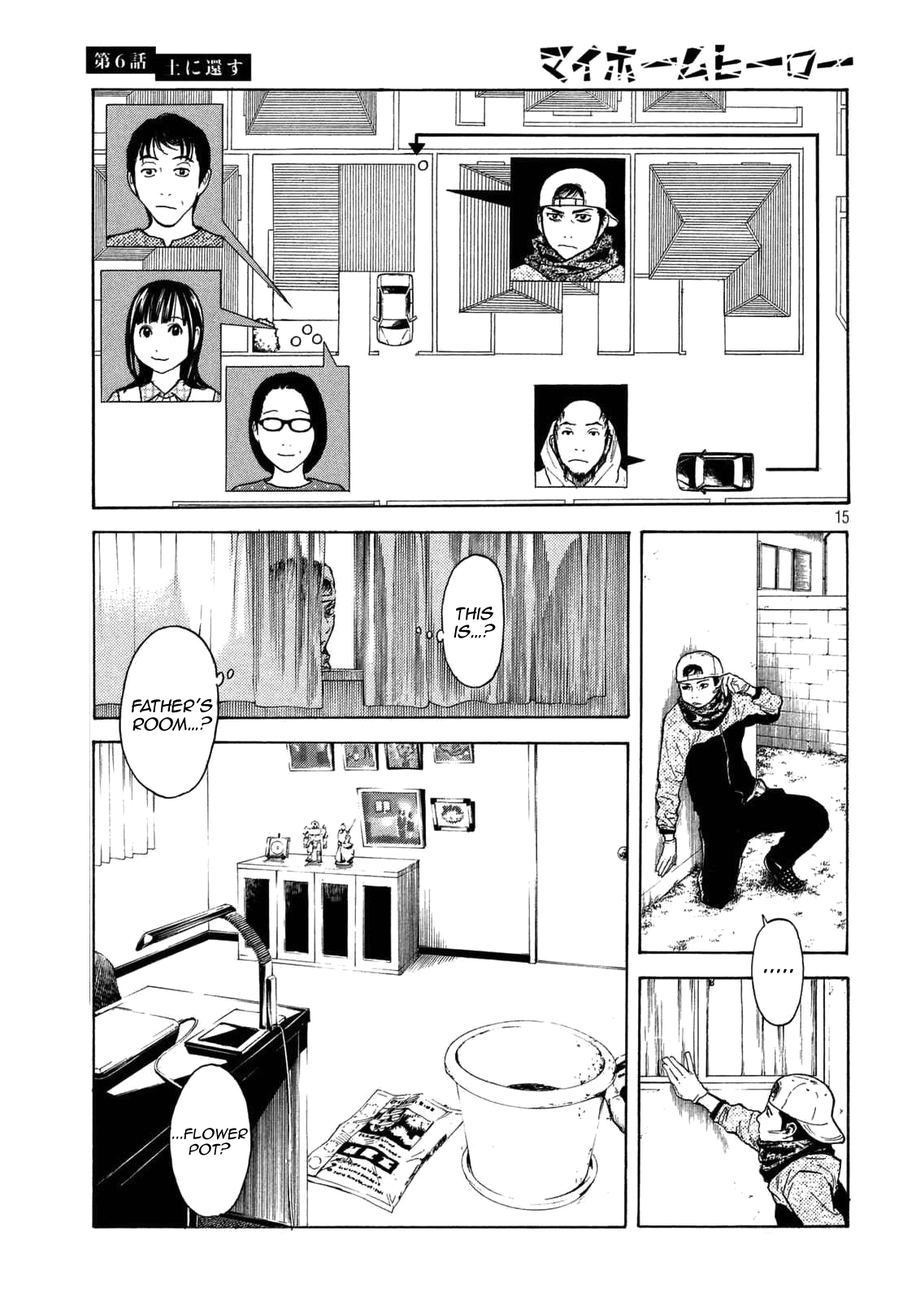
<style>
.page{position:relative;width:916px;height:1301px;background:#ffffff}
.page>*{position:absolute;margin:0}
.t1{font:15.2px "AnimeAce2.0BB";color:#000000;font-style:italic}
.t2{font:20.6px "AnimeAce2.0BB";color:#000000;font-style:italic}
.t3{font:13px "AnimeAce2.0BB";color:#000000;font-style:italic}
</style>
<div class="page">
<p class="t1" style="left:454px;top:607px;width:42px;height:31px;text-align:center">This is…?</p>
<p class="t1" style="left:132px;top:698px;width:81px;height:33px;text-align:center">Father’s room…?</p>
<p class="t2" style="left:764px;top:969px;width:30px;height:4px">.....</p>
<p class="t3" style="left:172px;top:1128px;width:76px;height:28px;text-align:center">...flower<br>pot?</p>
</div>
